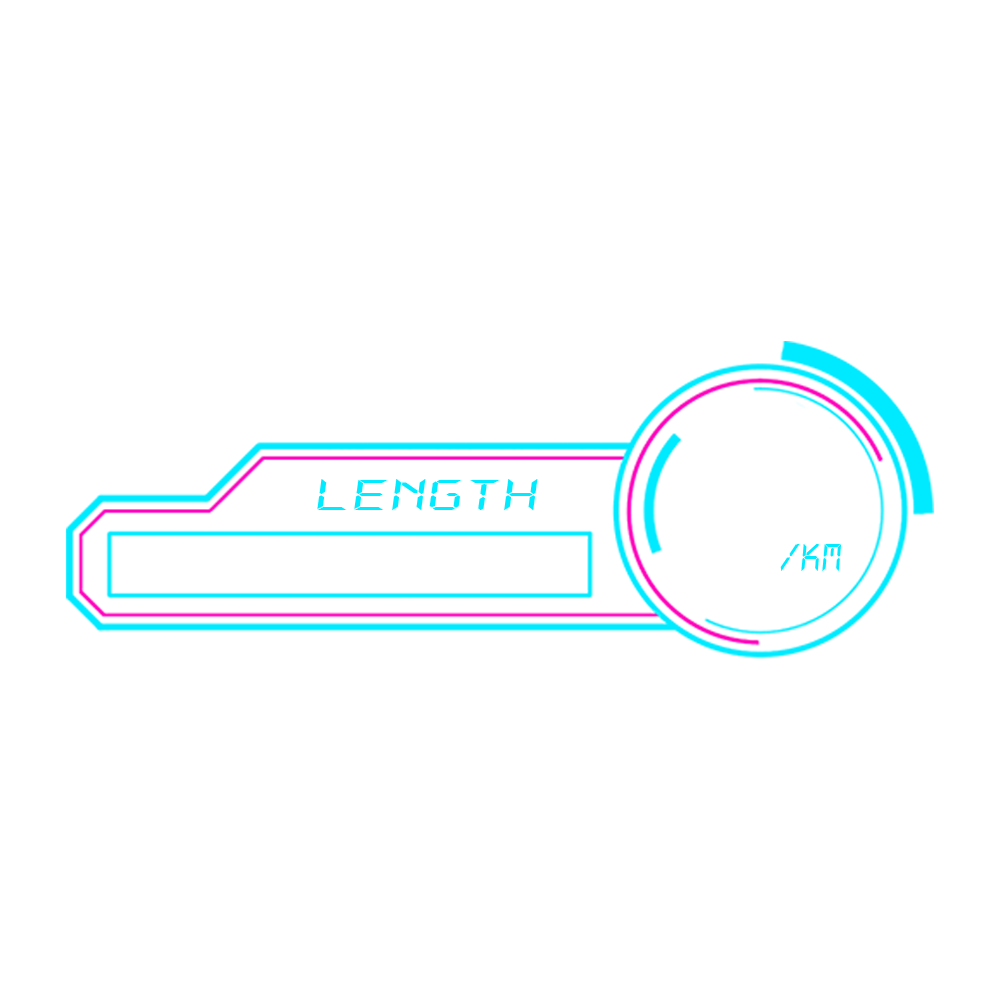
<style>
.page{position:relative;width:1000px;height:1000px;background:#ffffff}
.page>*{position:absolute;margin:0}
.t1{font:48.3px "DS-Digital-Italic";color:#00ebff;scale:1.58 1}
.t2{font:43px "DS-Digital-Italic";color:#00ebff}
</style>
<div class="page">
<p class="t1" style="left:317px;top:479px;width:221px;height:32px">LENGTH</p>
<p class="t2" style="left:780px;top:544px;width:62px;height:27px">/km</p>
</div>
